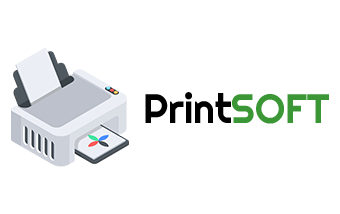
<style>
.page{position:relative;width:340px;height:214px;background:#ffffff}
.page>*{position:absolute;margin:0}
.t1{font:41.1px "Righteous-Regular";color:#000000;scale:0.94 1}
.t2{font:41.1px "Righteous-Regular";color:#3b9636;scale:0.94 1}
</style>
<div class="page">
<p class="t1" style="left:145px;top:92px;width:184px;height:32px">Print<span class="t2">SOFT</span></p>
</div>
